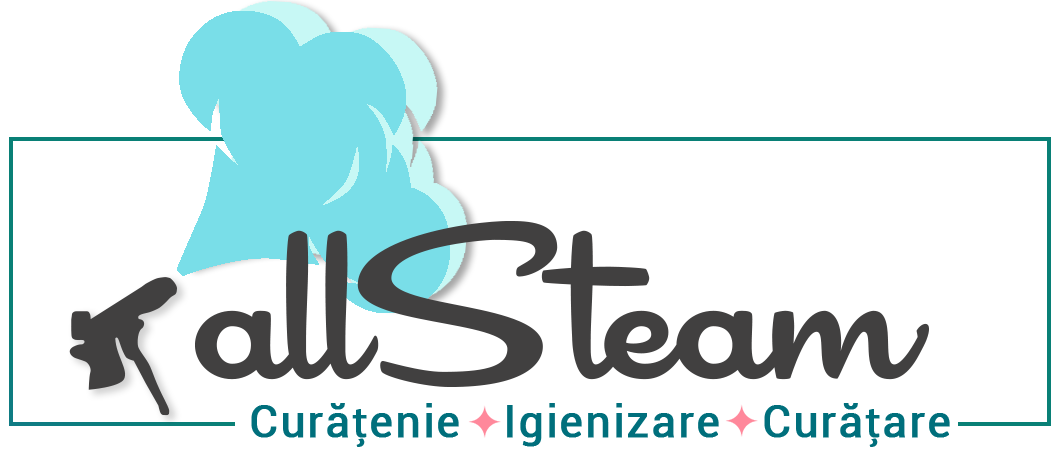
<style>
.page{position:relative;width:1058px;height:450px;background:#ffffff}
.page>*{position:absolute;margin:0}
.t1{font:43.8px "Roboto-Regular";letter-spacing:0.035em;color:#006f7c;font-weight:bold}
.t2{font:43.8px "MyriadPro-Regular";letter-spacing:0.035em;color:#006f7c;font-weight:bold}
</style>
<div class="page">
<p class="t1" style="left:251px;top:403px;width:699px;height:44px">Cură<span class="t2">ț</span>enie   Igienizare   Cură<span class="t2">ț</span>are</p>
</div>
